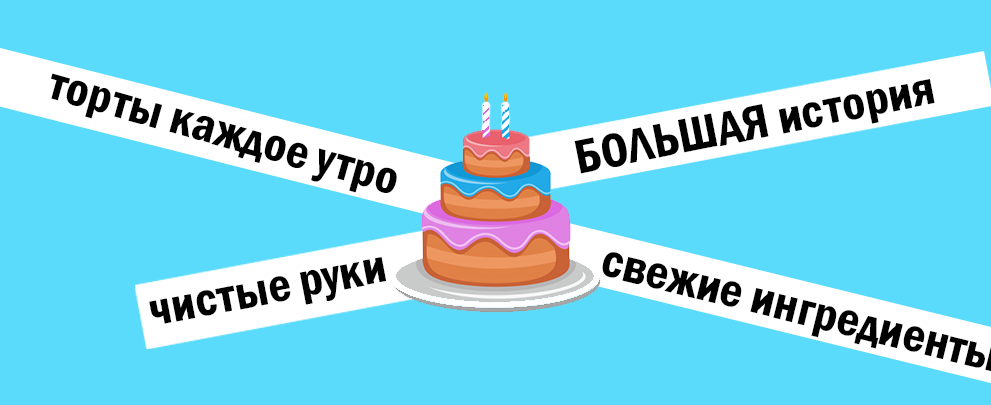
<style>
.page{position:relative;width:991px;height:405px;background:#5adbfb}
.page>*{position:absolute;margin:0}
.t1{font:49.4px "FranklinGothic-DemiCond";color:#000000}
</style>
<div class="page">
<p class="t1" style="left:51px;top:73px;width:346px;height:120px;rotate:16deg">торты каждое утро</p>
<p class="t1" style="left:574px;top:79px;width:361px;height:95px;rotate:-11deg">БОЛЬШАЯ история</p>
<p class="t1" style="left:149px;top:257px;width:238px;height:67px;rotate:-11deg">чистые руки</p>
</div>
